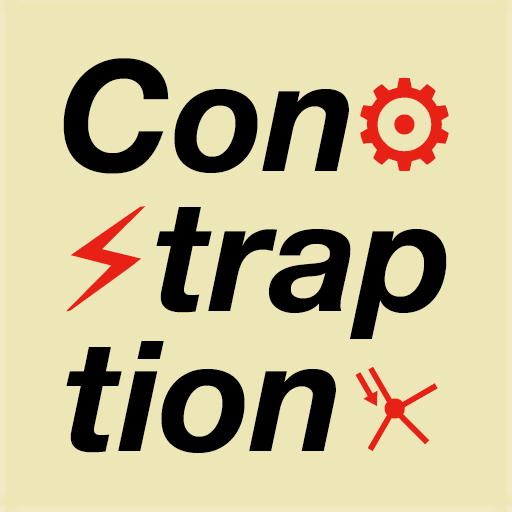
<style>
.page{position:relative;width:512px;height:512px;background:#ede7b8}
.page>*{position:absolute;margin:0}
.t1{font:154.2px/139.8px "HelveticaNeue-BoldItalic";color:#000000}
.t2{font:154.2px/139.8px "Menlo-Regular";color:#e72116}
.t3{font:154.2px/139.8px "AppleSymbols";color:#e72116}
</style>
<div class="page">
<p class="t1" style="left:63px;top:58px;width:386px;height:395px;text-align:center">Con<span class="t2">⚙<br></span><span class="t3">⚡</span>trap<br>tion<span class="t3">⏧</span></p>
</div>
